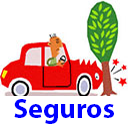
<style>
.page{position:relative;width:128px;height:128px;background:#ffffff}
.page>*{position:absolute;margin:0}
.t1{font:28px "MyriadPro-Bold";color:#0000ff}
</style>
<div class="page">
<p class="t1" style="left:14px;top:99px;width:100px;height:25px">Seguros</p>
</div>
